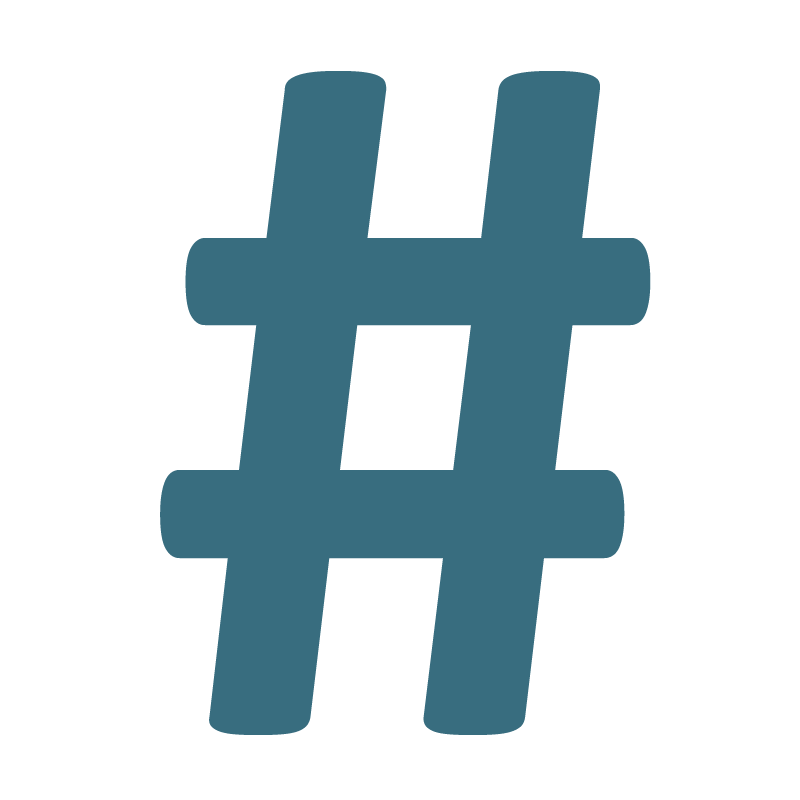
<style>
.page{position:relative;width:800px;height:800px;background:#ffffff}
.page>*{position:absolute;margin:0}
.t1{font:1041.7px "Calibri-Bold";letter-spacing:-0.012em;color:#386d7f}
</style>
<div class="page">
<p class="t1" style="left:160px;top:71px;width:491px;height:664px">#</p>
</div>
